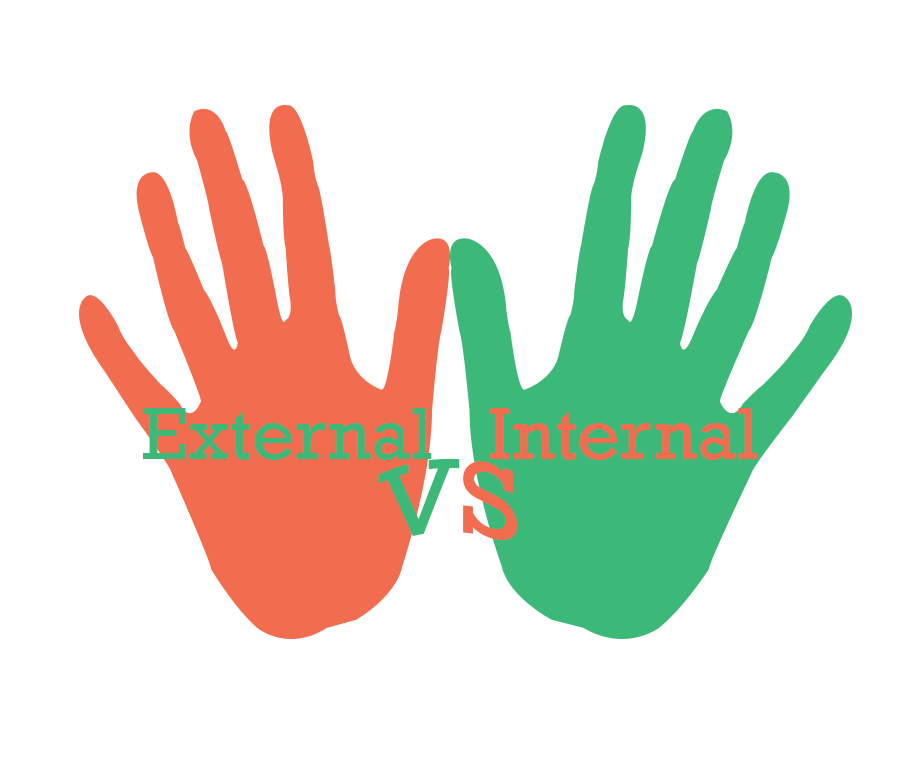
<style>
.page{position:relative;width:900px;height:768px;background:#ffffff}
.page>*{position:absolute;margin:0}
.t1{font:75px "Rockwell";color:#3cb878}
.t2{font:75px "Rockwell";color:#f26c4f}
.t3{font:108.3px "Rockwell";color:#3cb878}
.t4{font:108.3px "Rockwell";color:#f26c4f}
</style>
<div class="page">
<p class="t1" style="left:143px;top:408px;width:289px;height:52px">External</p>
<p class="t2" style="left:490px;top:408px;width:268px;height:52px">Internal</p>
<p class="t3" style="left:378px;top:458px;width:139px;height:82px">V<span class="t4">S</span></p>
</div>
